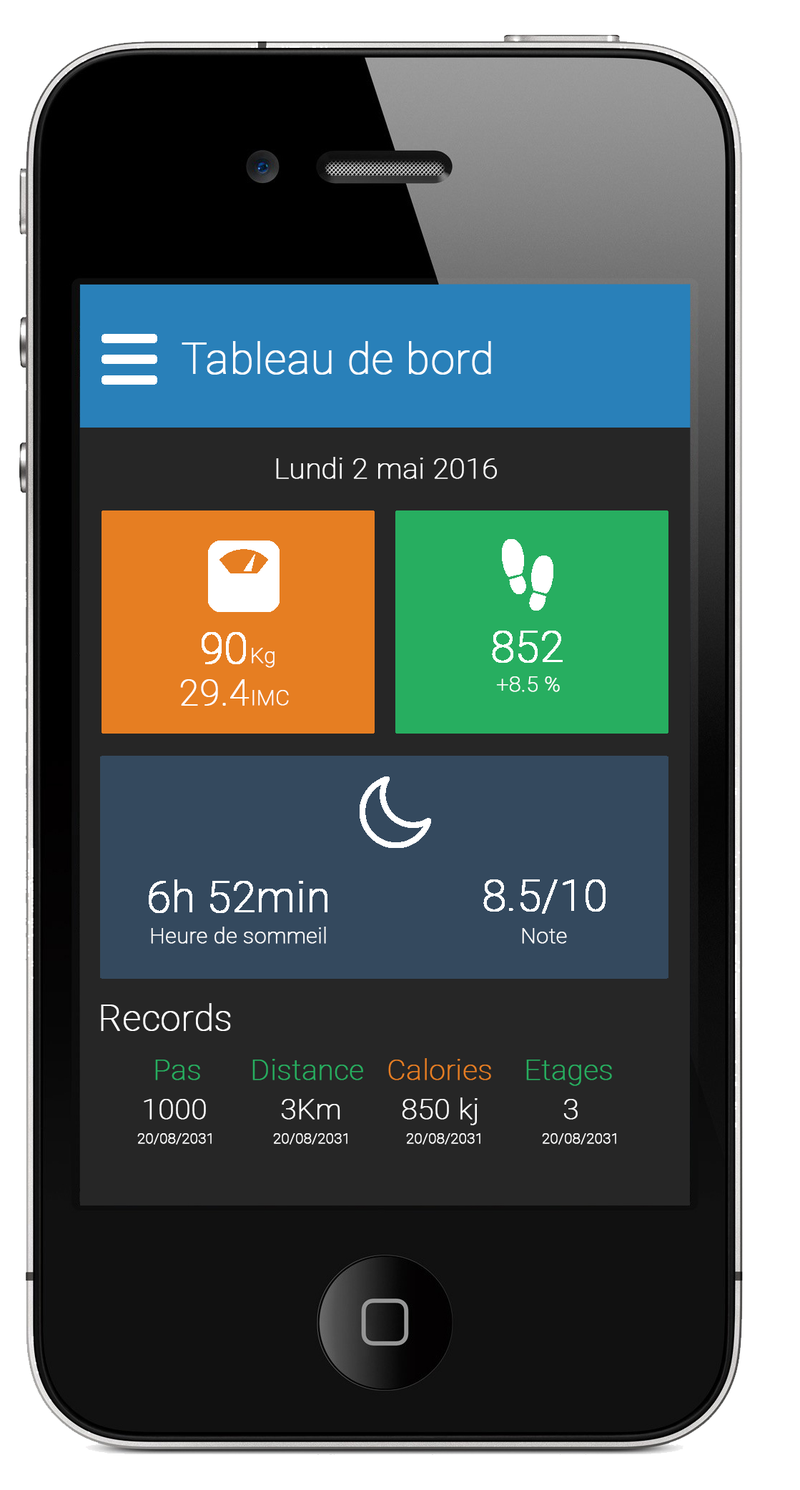
<style>
.page{position:relative;width:800px;height:1490px}
.page>*{position:absolute;margin:0}
.t1{font:42.9px "Roboto-Thin";color:#ffffff;font-weight:bold}
.t2{font:28.6px "Roboto-Thin";color:#ffffff;font-weight:bold}
.t3{font:21.5px "Roboto-Thin";color:#ffffff;font-weight:bold}
.t4{font:35.8px "Roboto-Thin";color:#ffffff;font-weight:bold}
.t5{font:28.6px "Roboto-Thin";color:#27ae60;font-weight:bold}
.t6{font:28.6px "Roboto-Thin";color:#e67e22;font-weight:bold}
.t7{font:14.3px "Roboto-Thin";color:#ffffff;font-weight:bold}
</style>
<div class="page">
<p class="t1" style="left:182px;top:341px;width:309px;height:34px">Tableau de bord</p>
<p class="t2" style="left:276px;top:457px;width:221px;height:22px">Lundi 2 mai 2016</p>
<p class="t3" style="left:252px;top:648px;width:23px;height:20px">Kg</p>
<p class="t3" style="left:496px;top:676px;width:64px;height:16px">+8.5 %</p>
<p class="t4" style="left:180px;top:679px;width:70px;height:27px">29.4</p>
<p class="t3" style="left:252px;top:690px;width:37px;height:16px">IMC</p>
<p class="t3" style="left:151px;top:927px;width:175px;height:17px">Heure de sommeil</p>
<p class="t3" style="left:522px;top:928px;width:45px;height:16px">Note</p>
<p class="t4" style="left:101px;top:1003px;width:130px;height:28px">Records</p>
<p class="t5" style="left:155px;top:1060px;width:45px;height:20px">Pas</p>
<p class="t5" style="left:252px;top:1059px;width:111px;height:21px">Distance</p>
<p class="t6" style="left:388px;top:1058px;width:103px;height:22px">Calories</p>
<p class="t5" style="left:526px;top:1060px;width:86px;height:26px">Etages</p>
<p class="t2" style="left:402px;top:1098px;width:76px;height:28px">850 kj</p>
<p class="t2" style="left:144px;top:1099px;width:62px;height:21px">1000</p>
<p class="t2" style="left:281px;top:1099px;width:59px;height:21px">3Km</p>
<p class="t2" style="left:563px;top:1099px;width:15px;height:21px">3</p>
<p class="t7" style="left:137px;top:1133px;width:75px;height:12px">20/08/2031</p>
<p class="t7" style="left:273px;top:1133px;width:75px;height:12px">20/08/2031</p>
<p class="t7" style="left:406px;top:1133px;width:75px;height:12px">20/08/2031</p>
<p class="t7" style="left:542px;top:1133px;width:74px;height:12px">20/08/2031</p>
</div>
